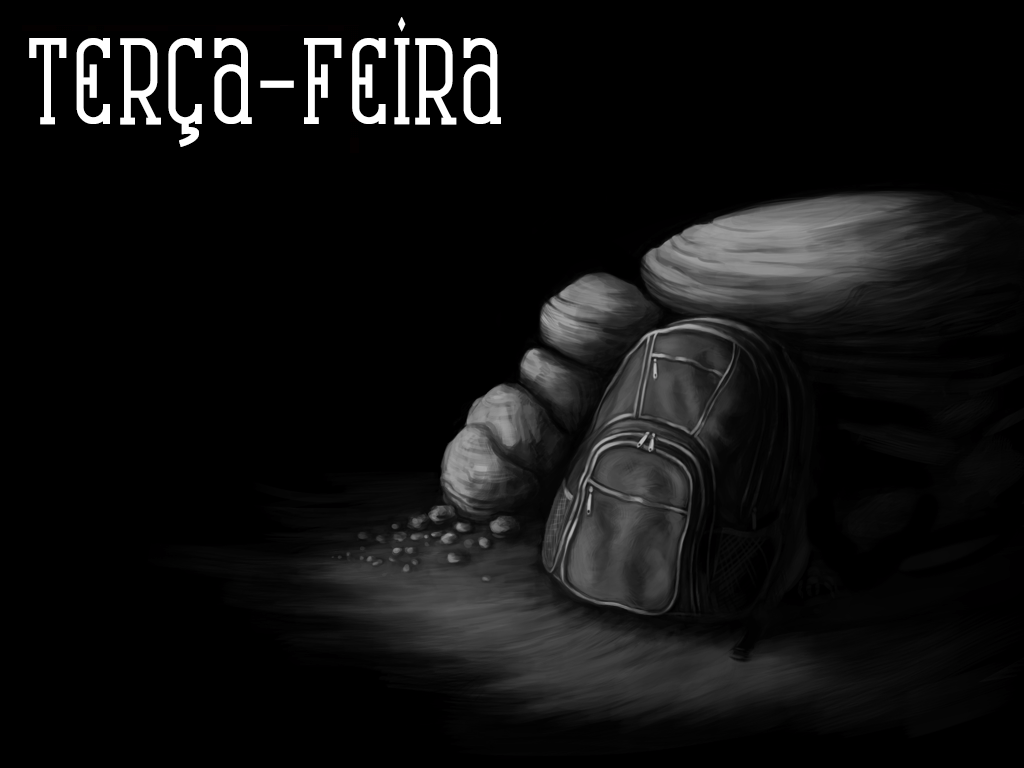
<style>
.page{position:relative;width:1024px;height:768px;background:#000000}
.page>*{position:absolute;margin:0}
.t1{font:132px "CatharsisRequiemBold";letter-spacing:-0.002em;color:#ffffff}
</style>
<div class="page">
<p class="t1" style="left:29px;top:17px;width:472px;height:130px">terça-feira</p>
</div>
